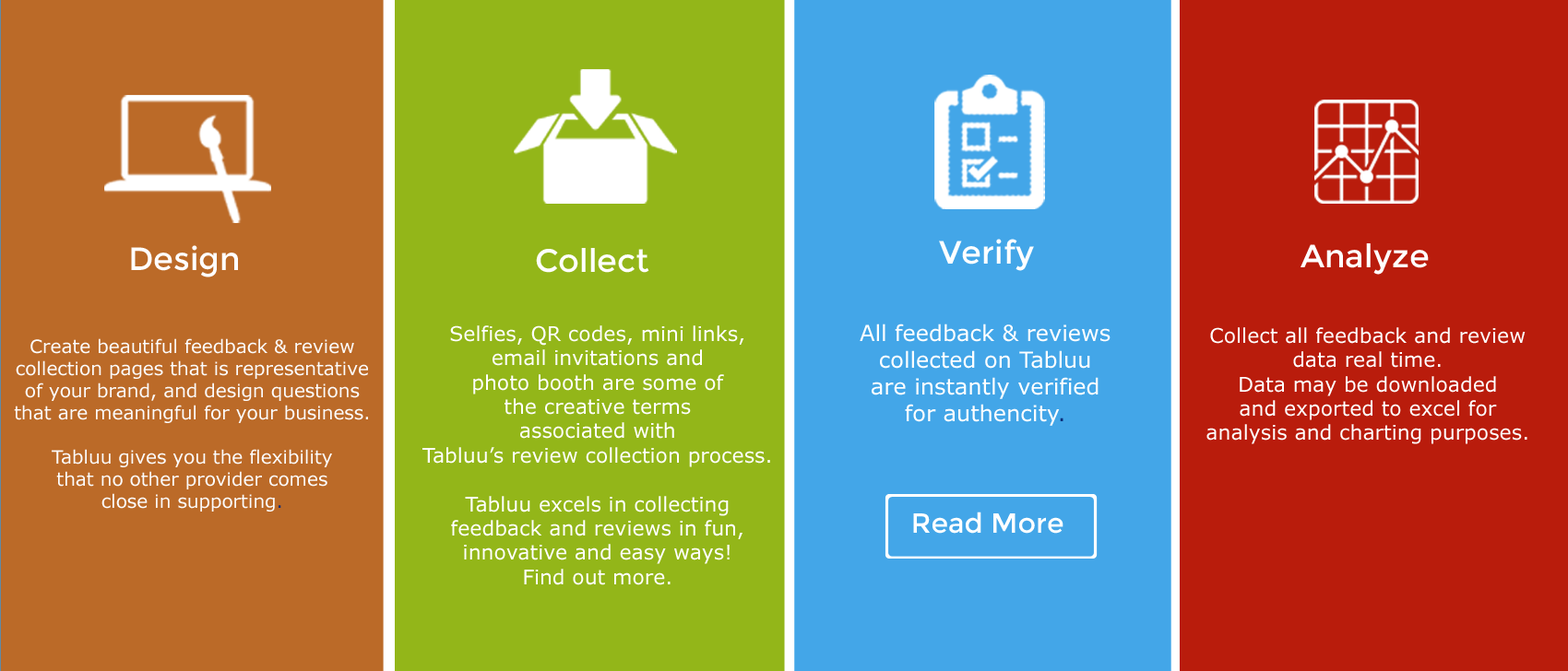
<style>
.page{position:relative;width:1568px;height:671px;background:#b91c0c}
.page>*{position:absolute;margin:0}
.t1{font:32.3px "Montserrat-Regular";color:#ffffff}
.t2{font:20.3px "Verdana";color:#ffffff}
.t3{font:22.1px "Verdana";color:#ffffff}
.t4{font:22.1px "Verdana";color:#0b2e7a}
.t5{font:18.4px "Verdana";color:#fcfcfd}
.t6{font:18.4px "Verdana";color:#0b2e7a}
.t7{font:27.7px "Montserrat-Regular";color:#ffffff}
</style>
<div class="page">
<p class="t1" style="left:131px;top:245px;width:107px;height:33px">Design</p>
<p class="t1" style="left:939px;top:239px;width:95px;height:32px">Verify</p>
<p class="t1" style="left:1301px;top:244px;width:128px;height:31px">Analyze</p>
<p class="t1" style="left:536px;top:248px;width:113px;height:25px">Collect</p>
<p class="t2" style="left:422px;top:326px;width:348px;height:260px;text-align:center">Selfies, QR codes, mini links, <br>email invitations and <br>photo booth are some of <br>the creative terms <br>associated with  <br>Tabluu’s review collection process. <br><br>Tabluu excels in collecting <br>feedback and reviews in fun, <br>innovative and easy ways! <br>Find out more.</p>
<p class="t3" style="left:860px;top:324px;width:251px;height:102px;text-align:center">All feedback &amp; reviews <br>collected on Tabluu <br>are instantly verified <br>for authencity<span class="t4">.</span></p>
<p class="t2" style="left:1206px;top:327px;width:321px;height:118px;text-align:center">Collect all feedback and review <br>data real time. <br>Data may be downloaded <br>and exported to excel for <br>analysis and charting purposes.</p>
<p class="t5" style="left:14px;top:339px;width:354px;height:173px;text-align:center">Create beautiful feedback &amp; review <br>collection pages that is representative <br>of your brand, and design questions <br>that are meaningful for your business. <br><br>Tabluu gives you the flexibility <br>that no other provider comes <br>close in supporting<span class="t6">.</span></p>
<p class="t7" style="left:913px;top:512px;width:150px;height:22px">Read More</p>
</div>
